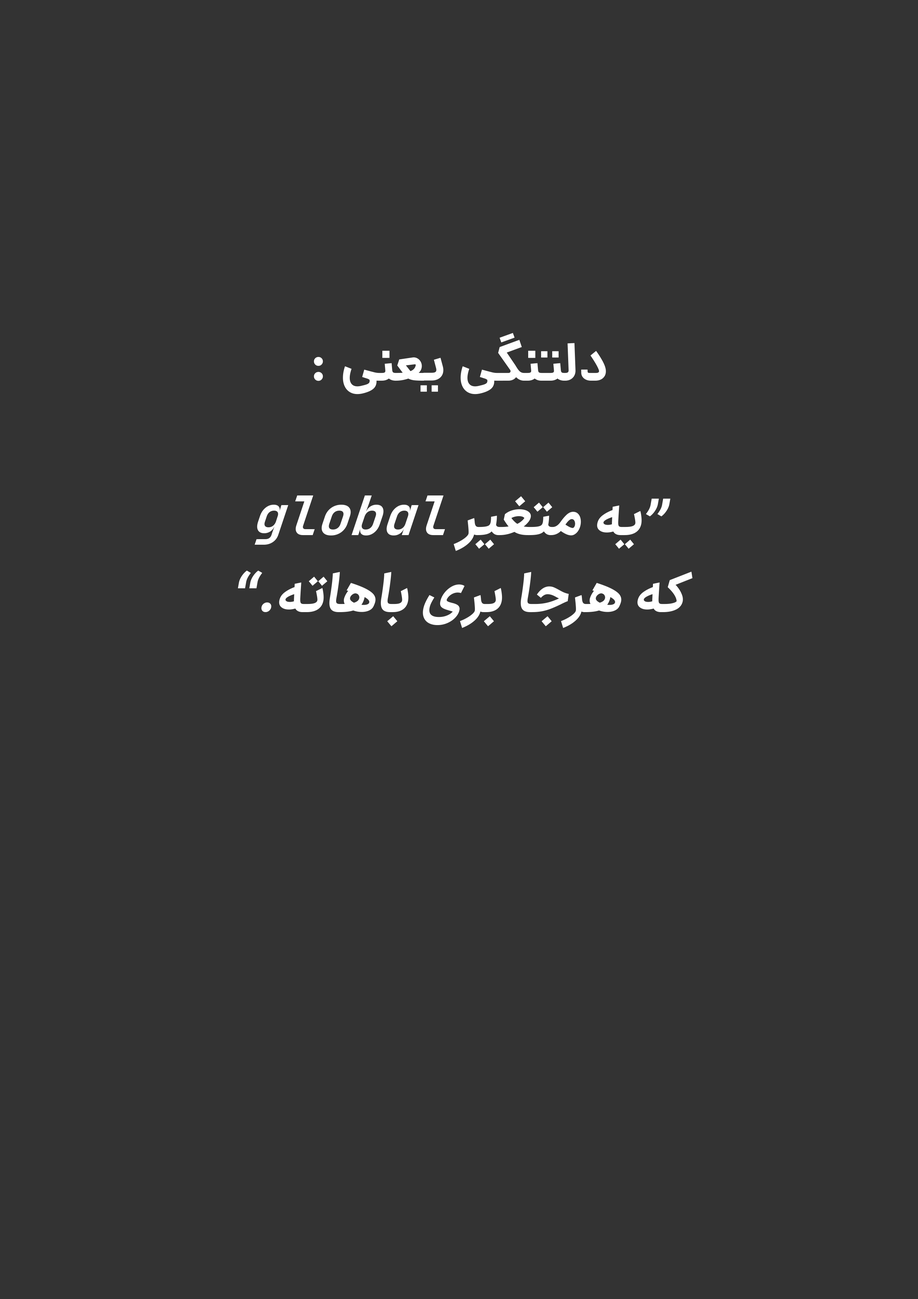
<style>
.page{position:relative;width:918px;height:1299px;background:#333333}
.page>*{position:absolute;margin:0}
.t1{font:54.2px/77.1px "IRANSansX-Bold";color:#ffffff;font-style:italic}
.t2{font:54.2px/77.1px "Dana-Bold";color:#ffffff}
.t3{font:54.2px/77.1px "JetBrainsMono-BoldItalic";color:#ffffff;font-style:italic}
</style>
<div class="page">
<p class="t1" style="left:238px;top:333px;width:455px;height:295px;text-align:center"><span class="t2">دلتنگی یعنی :<br><br></span>“یه متغیر <span class="t3">global<br></span>که هرجا بری باهاته.”</p>
</div>
